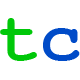
<style>
.page{position:relative;width:80px;height:80px;background:#ffffff}
.page>*{position:absolute;margin:0}
.t1{font:71px "CourierNewPS-BoldMT";letter-spacing:0.02em;color:#00c809}
.t2{font:71px "CourierNewPS-BoldMT";letter-spacing:0.02em;color:#004bc8}
</style>
<div class="page">
<p class="t1" style="left:0px;top:18px;width:80px;height:43px">t<span class="t2">c</span></p>
</div>
